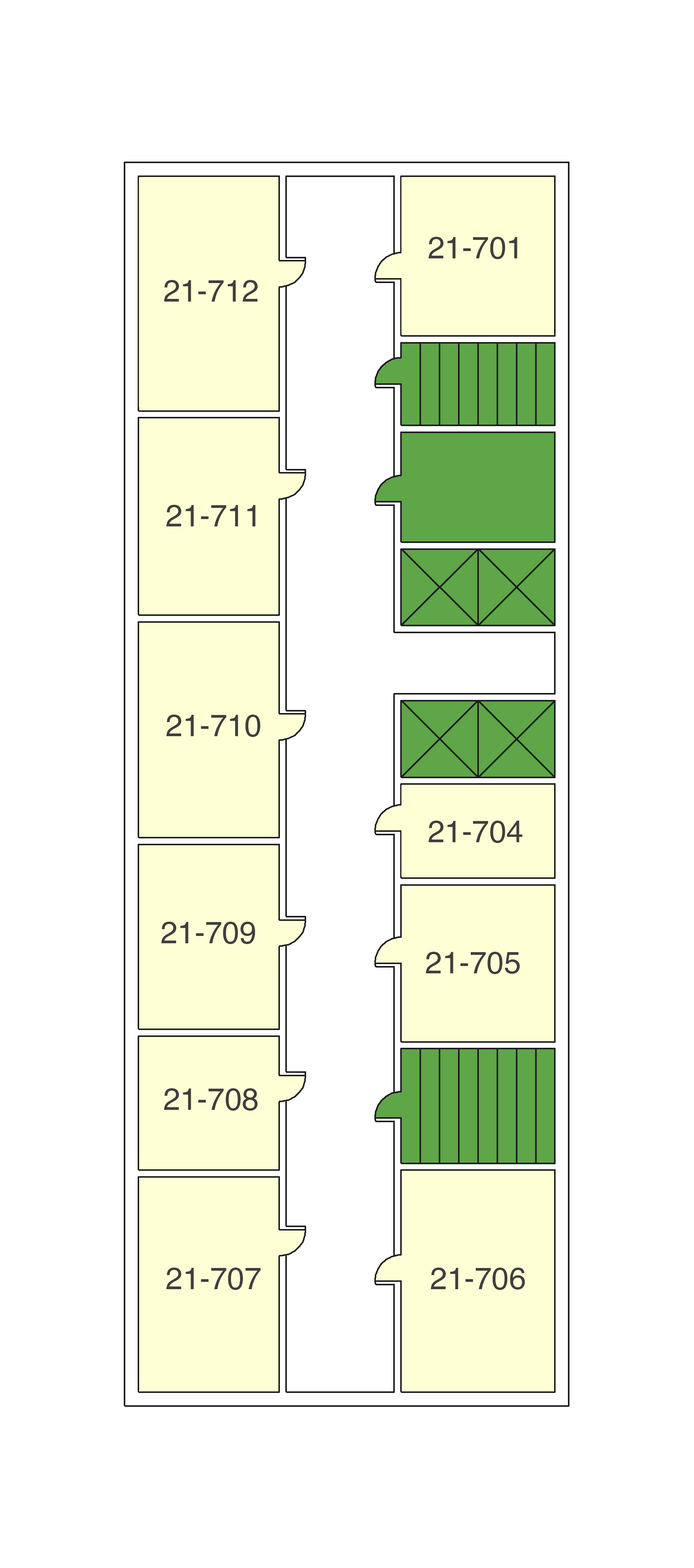
<style>
.page{position:relative;width:694px;height:1568px;background:#ffffff}
.page>*{position:absolute;margin:0}
.t1{font:30.8px "Helvetica";color:#3f3f3f}
</style>
<div class="page">
<p class="t1" style="left:428px;top:237px;width:90px;height:22px">21-701</p>
<p class="t1" style="left:164px;top:280px;width:94px;height:22px">21-712</p>
<p class="t1" style="left:166px;top:505px;width:90px;height:21px">21-711</p>
<p class="t1" style="left:166px;top:715px;width:94px;height:22px">21-710</p>
<p class="t1" style="left:428px;top:821px;width:95px;height:22px">21-704</p>
<p class="t1" style="left:161px;top:922px;width:94px;height:22px">21-709</p>
<p class="t1" style="left:426px;top:952px;width:94px;height:22px">21-705</p>
<p class="t1" style="left:164px;top:1088px;width:94px;height:23px">21-708</p>
<p class="t1" style="left:166px;top:1268px;width:95px;height:22px">21-707</p>
<p class="t1" style="left:431px;top:1268px;width:94px;height:22px">21-706</p>
</div>
